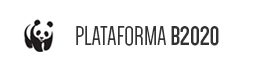
<style>
.page{position:relative;width:260px;height:70px;background:#ffffff}
.page>*{position:absolute;margin:0}
.t1{font:28px "Dense-Regular";color:#333333;text-transform:uppercase}
.t2{font:28px "Dense-Bold";color:#333333;text-transform:uppercase}
</style>
<div class="page">
<p class="t1" style="left:76px;top:25px;width:143px;height:21px">PLATAFORMA <span class="t2">B2020</span></p>
</div>
